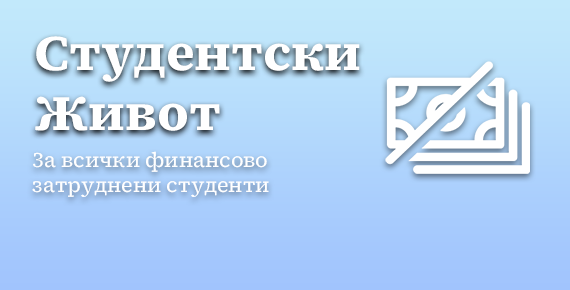
<style>
.page{position:relative;width:570px;height:290px}
.page>*{position:absolute;margin:0}
.t1{font:50px "SourceSerif4Roman-CaptionBold";color:#ffffff}
.t2{font:20.8px "SourceSerif4Roman-Caption";color:#ffffff}
</style>
<div class="page">
<p class="t1" style="left:35px;top:36px;width:325px;height:95px">Студентски<br>Живот</p>
<p class="t2" style="left:32px;top:151px;width:237px;height:46px">За всички финансово затруднени студенти</p>
</div>
